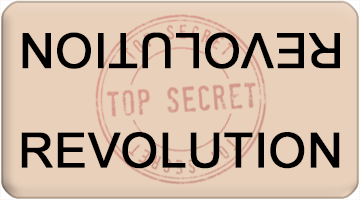
<style>
.page{position:relative;width:360px;height:200px;background:#e8d0bb}
.page>*{position:absolute;margin:0}
.t1{font:48px "ArialMT";color:#000000;font-weight:bold}
</style>
<div class="page">
<p class="t1" style="left:22px;top:32px;width:318px;height:37px;rotate:180deg">REVOLUTION</p>
<p class="t1" style="left:21px;top:132px;width:319px;height:37px">REVOLUTION</p>
</div>
